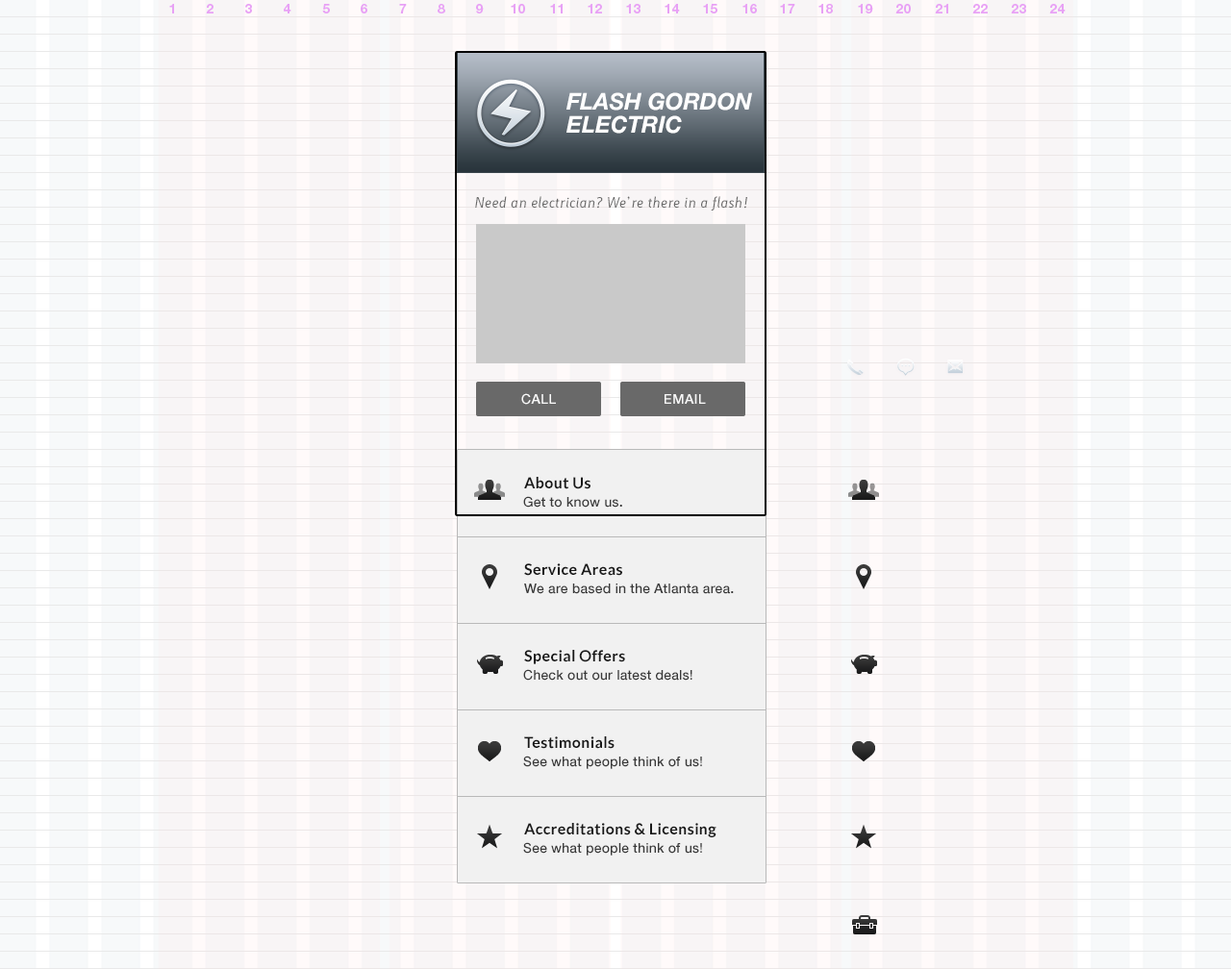
<style>
.page{position:relative;width:1231px;height:969px;background:#f8f5f6}
.page>*{position:absolute;margin:0}
.t1{font:23.1px/23.1px "HelveticaNeue-BoldItalic";color:#ffffff;text-transform:uppercase}
.t2{font:13.5px "LacunaItalic";letter-spacing:0.025em;color:#696969}
.t3{font:13.5px "HelveticaNeue-Medium";letter-spacing:0.025em;color:#f9f9f9}
.t4{font:15.4px "Lato-Bold";letter-spacing:0.025em;color:#191919}
.t5{font:13.5px "HelveticaNeue-Medium";letter-spacing:0.01em;color:#393939}
</style>
<div class="page">
<p class="t1" style="left:566px;top:92px;width:186px;height:42px">Flash Gordon<br>Electric</p>
<p class="t2" style="left:475px;top:196px;width:272px;height:15px">Need an electrician? We’re there in a flash!</p>
<p class="t3" style="left:521px;top:393px;width:35px;height:12px">CALL</p>
<p class="t3" style="left:664px;top:394px;width:42px;height:10px">EMAIL</p>
<p class="t4" style="left:524px;top:477px;width:66px;height:12px">About Us</p>
<p class="t5" style="left:523px;top:496px;width:99px;height:12px">Get to know us.</p>
<p class="t4" style="left:524px;top:563px;width:98px;height:13px">Service Areas</p>
<p class="t5" style="left:524px;top:584px;width:210px;height:10px">We are based in the Atlanta area.</p>
<p class="t4" style="left:524px;top:650px;width:101px;height:14px">Special Offers</p>
<p class="t5" style="left:523px;top:669px;width:169px;height:12px">Check out our latest deals!</p>
<p class="t4" style="left:524px;top:736px;width:90px;height:13px">Testimonials</p>
<p class="t5" style="left:523px;top:756px;width:179px;height:13px">See what people think of us!</p>
<p class="t4" style="left:524px;top:823px;width:192px;height:14px">Accreditations &amp; Licensing</p>
<p class="t5" style="left:523px;top:842px;width:179px;height:14px">See what people think of us!</p>
</div>
